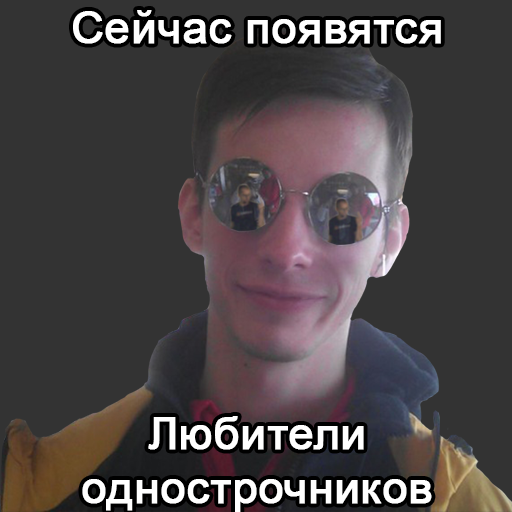
<style>
.page{position:relative;width:512px;height:512px;background:#333333}
.page>*{position:absolute;margin:0}
.t1{font:45px "ArialMT";color:#ffffff;font-weight:bold}
</style>
<div class="page">
<p class="t1" style="left:73px;top:10px;width:368px;height:34px">Сейчас появятся</p>
<p class="t1" style="left:82px;top:416px;width:350px;height:97px;text-align:center">Любители<br>однострочников</p>
</div>
